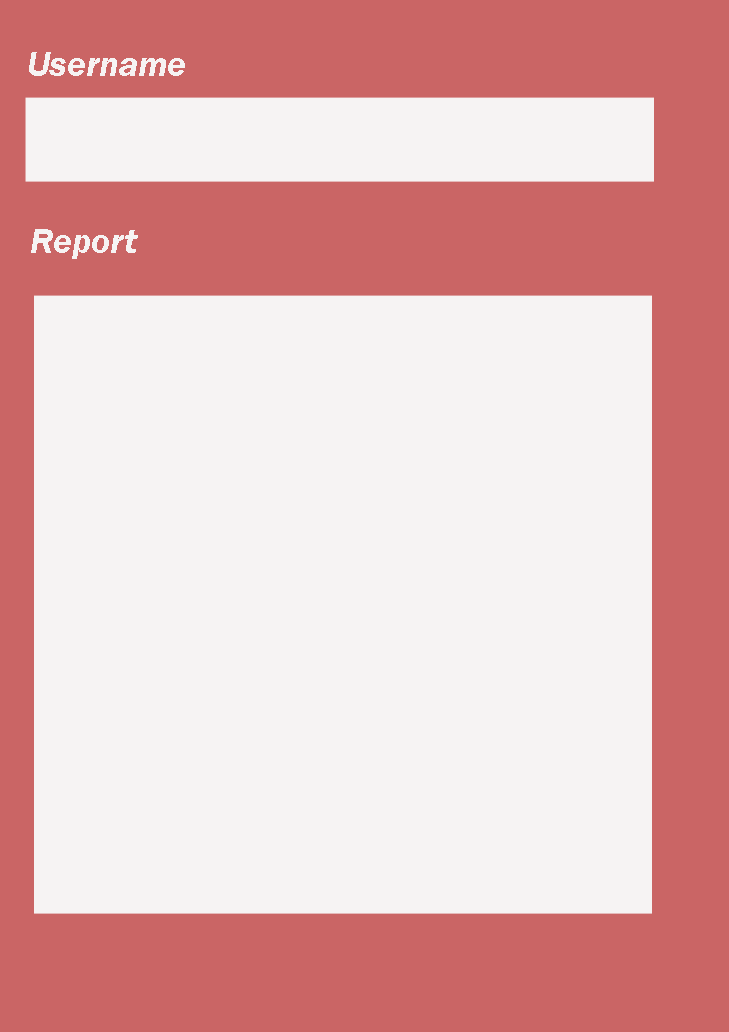
<style>
.page{position:relative;width:729px;height:1032px;background:#f6f3f3}
.page>*{position:absolute;margin:0}
.t1{font:36px "FranklinGothic-DemiItalic";color:#f6f3f3}
</style>
<div class="page">
<p class="t1" style="left:29px;top:52px;width:156px;height:24px">Username</p>
<p class="t1" style="left:31px;top:229px;width:107px;height:30px">Report</p>
</div>
